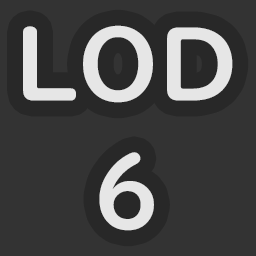
<style>
.page{position:relative;width:256px;height:256px;background:#333333}
.page>*{position:absolute;margin:0}
.t1{font:100px/128px "UDDigiKyokashoNK-B";color:#e6e6e6}
</style>
<div class="page">
<p class="t1" style="left:23px;top:25px;width:210px;height:206px;text-align:center">LOD<br>6</p>
</div>
